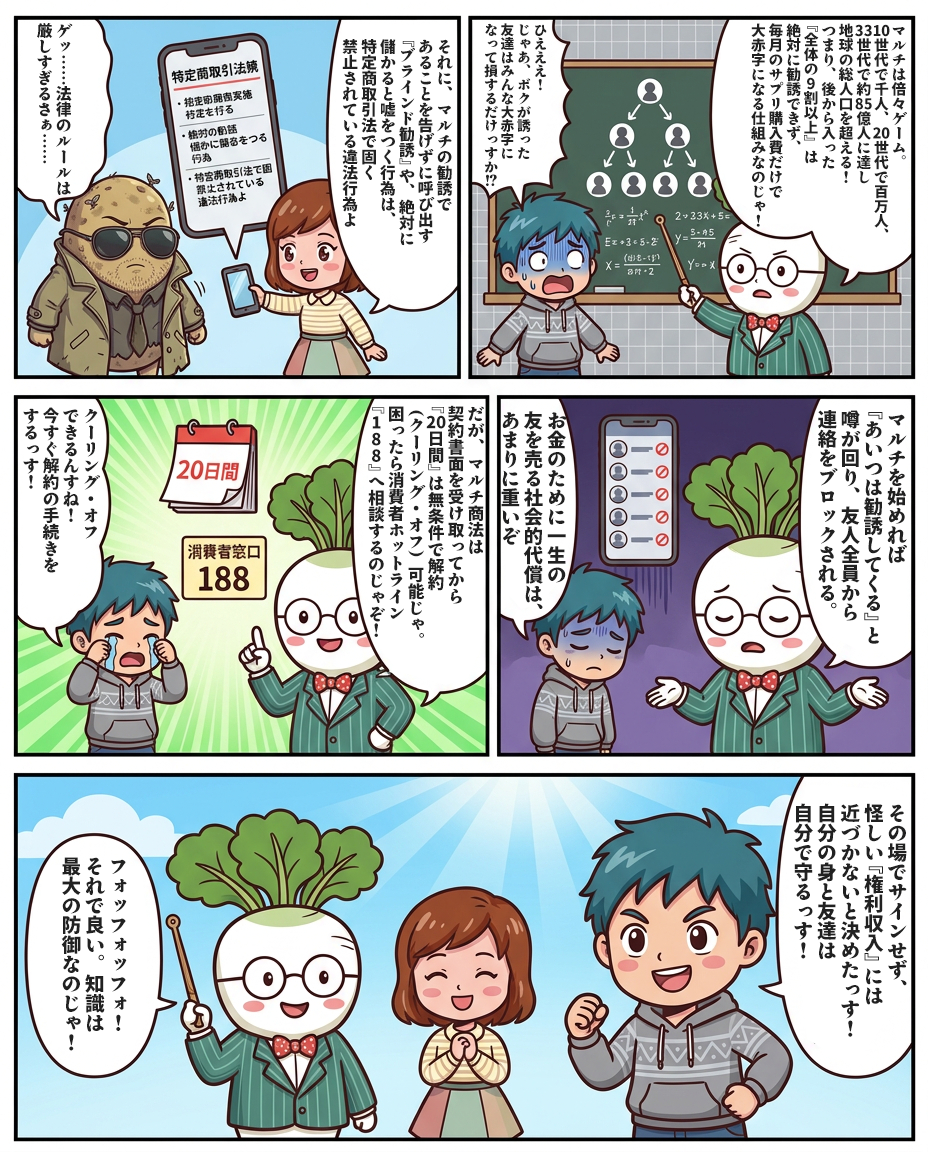
<style>
.page{position:relative;width:928px;height:1152px;background:#ffffff}
.page>*{position:absolute;margin:0}
.t1{font:15.8px "TenMinchoAntique-Heavy";color:#212121}
.t2{font:13.7px "TenMinchoAntique-Heavy";color:#212121}
.t3{font:14.7px "TenMinchoAntique-Heavy";color:#212121}
.t4{font:16.6px "TenMinchoAntique-Heavy";color:#212121}
.t5{font:19.2px "TenMinchoAntique-Heavy";color:#212121}
.t6{font:19.6px "TenMinchoAntique-Heavy";color:#212121}
</style>
<div class="page">
<p class="t1" style="left:37px;top:23px;width:36px;height:172px">ゲッ……法律のルールは<br>厳しすぎるさぁ……</p>
<p class="t2" style="left:484px;top:23px;width:63px;height:163px">ひえええ！<br>じゃあ、ボクが誘った<br>友達はみんな大赤字に<br>なって損するだけっすか！？</p>
<p class="t3" style="left:751px;top:23px;width:156px;height:210px">マルチは倍々ゲーム。<br>10世代で千人、20世代で百万人、<br>33世代で約85億人に達し<br>地球の総人口を超える！<br>つまり、後から入った<br>『全体の9割以上』は<br>絶対に勧誘できず、<br>毎月のサプリ購入費だけで<br>大赤字になる仕組みなのじゃ！</p>
<p class="t1" style="left:342px;top:39px;width:111px;height:207px">それに、マルチの勧誘で<br>あることを告げずに呼び出す<br>『ブラインド勧誘』や、絶対に<br>儲かると嘘をつく行為は、<br>特定商取引法で固く<br>禁止されている違法行為よ</p>
<p class="t4" style="left:23px;top:407px;width:77px;height:166px">クーリング・オフ<br>できるんすね！<br>今すぐ解約の手続きを<br>するっす！</p>
<p class="t4" style="left:368px;top:405px;width:117px;height:233px">だが、マルチ商法は<br>契約書面を受け取ってから<br>『20日間』は無条件で解約<br>（クーリング・オフ）可能じゃ。<br>困ったら消費者ホットライン<br>『188』へ相談するのじゃぞ！</p>
<p class="t5" style="left:501px;top:411px;width:66px;height:198px">お金のために一生の<br>友を売る社会的代償は、<br>あまりに重いぞ</p>
<p class="t5" style="left:818px;top:410px;width:89px;height:234px">マルチを始めれば<br>『あいつは勧誘してくる』と<br>噂が回り、友人全員から<br>連絡をブロックされる。</p>
<p class="t6" style="left:793px;top:803px;width:114px;height:234px">その場でサインせず、<br>怪しい『権利収入』には<br>近づかないと決めたっす！<br>自分の身と友達は<br>自分で守るっす！</p>
<p class="t6" style="left:61px;top:857px;width:66px;height:194px">フォッフォッフォ！<br>それで良い。知識は<br>最大の防御なのじゃ！</p>
</div>
